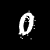
<style>
.page{position:relative;width:50px;height:50px;background:#000000}
.page>*{position:absolute;margin:0}
.t1{font:30px "TimesNewYorker";letter-spacing:-0.1em;color:#ffffff;font-weight:bold;font-style:italic}
</style>
<div class="page">
<p class="t1" style="left:18px;top:10px;width:18px;height:30px">0</p>
</div>
